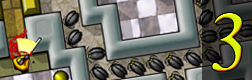
<style>
.page{position:relative;width:252px;height:80px}
.page>*{position:absolute;margin:0}
.t1{font:90.7px "Tom's-NewRoman"}
</style>
<div class="page">
<p class="t1" style="left:212px;top:13px;width:30px;height:58px">3</p>
</div>
